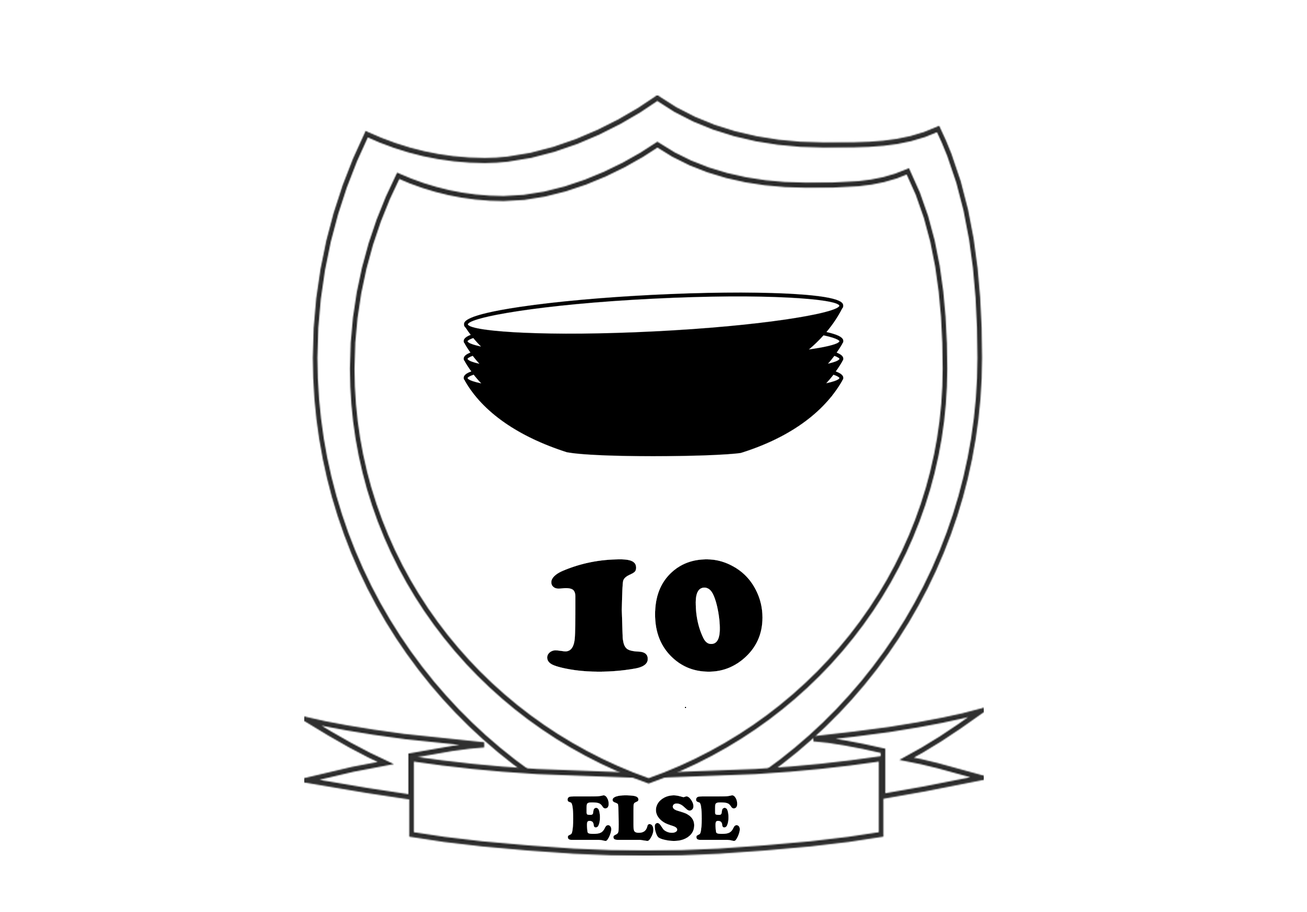
<style>
.page{position:relative;width:1307px;height:912px;background:#ffffff}
.page>*{position:absolute;margin:0}
.t1{font:195.3px "CooperBlack";color:#000000}
.t2{font:65.1px "CooperBlack";color:#000000}
</style>
<div class="page">
<p class="t1" style="left:547px;top:559px;width:216px;height:113px">10</p>
<p class="t2" style="left:567px;top:795px;width:174px;height:46px">ELSE</p>
</div>
